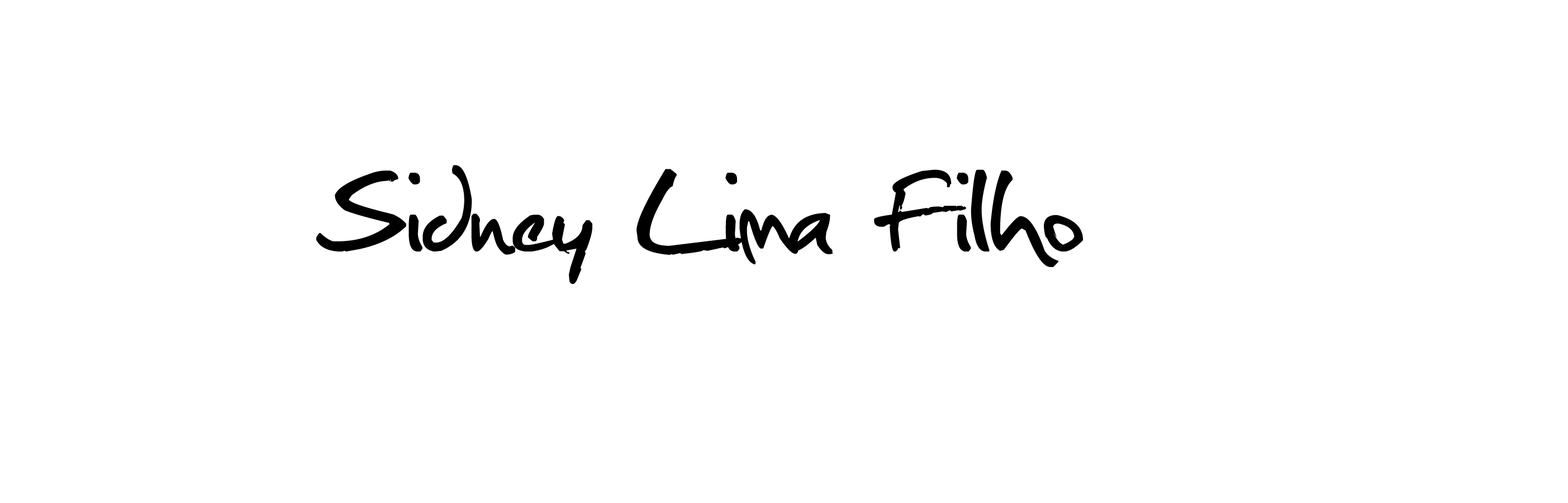
<style>
.page{position:relative;width:1568px;height:503px;background:#ffffff}
.page>*{position:absolute;margin:0}
.t1{font:152px "Christopherhand";color:#010001}
</style>
<div class="page">
<p class="t1" style="left:316px;top:165px;width:767px;height:119px">Sidney Lima Filho</p>
</div>
